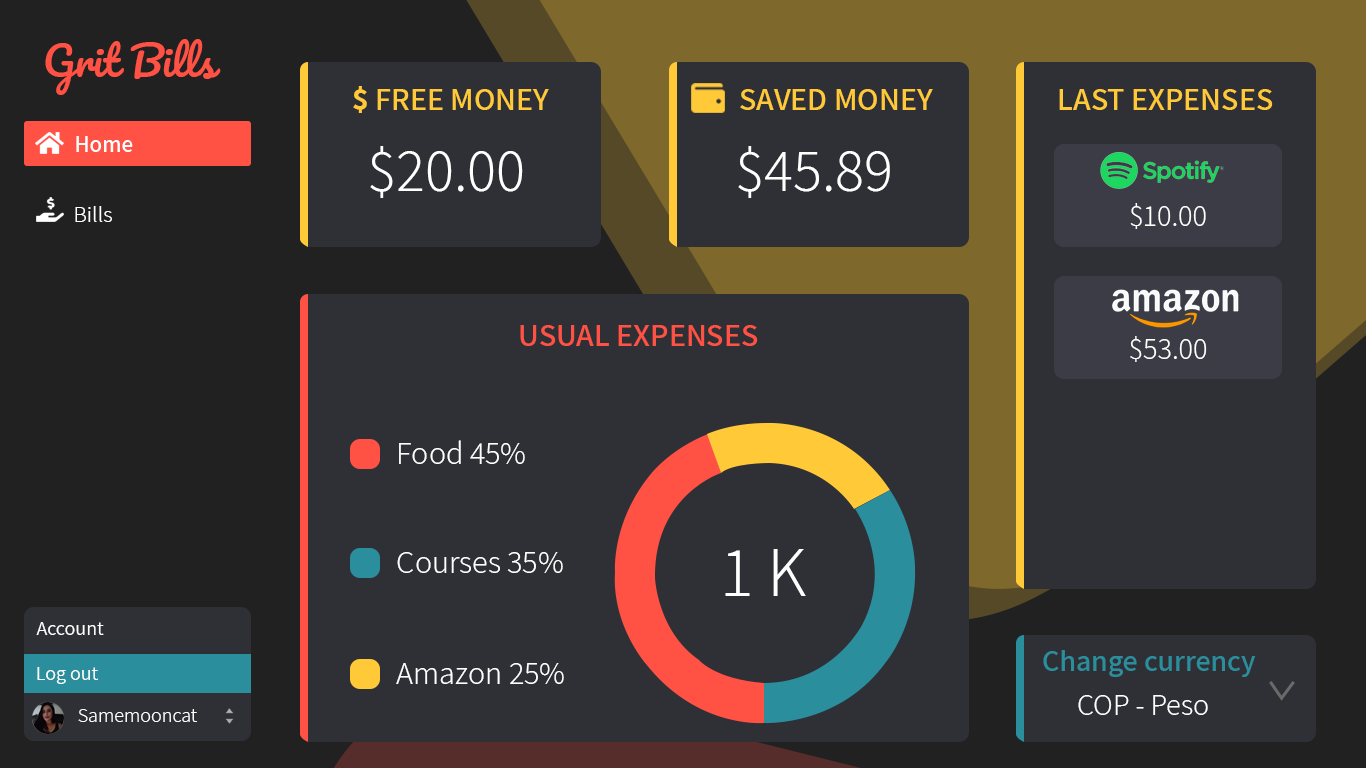
<style>
.page{position:relative;width:1366px;height:768px;background:#2f3036}
.page>*{position:absolute;margin:0}
.t1{font:40px "Pacifico-Regular";color:#ff5245}
.t2{font:32px "Assistant-SemiBold";color:#ffc938}
.t3{font:32px "Assistant-Bold";color:#ffc938}
.t4{font:23px "Assistant-SemiBold";color:#ffffff}
.t5{font:60px "Assistant-Light";color:#ffffff}
.t6{font:23px "Assistant-Light";color:#ffffff}
.t7{font:30px "Assistant-Light";color:#ffffff}
.t8{font:32px "Assistant-SemiBold";color:#ff5245}
.t9{font:32px "Assistant-Light";color:#ffffff}
.t10{font:70px "Assistant-Light";color:#ffffff}
.t11{font:20px "Assistant-Regular";color:#ffffff}
.t12{font:30px "Assistant-SemiBold";color:#2a8e9d}
.t13{font:20px "Assistant-Light";color:#ffffff}
</style>
<div class="page">
<p class="t1" style="left:45px;top:39px;width:176px;height:56px">Grit Bills</p>
<p class="t2" style="left:353px;top:86px;width:196px;height:27px"><span class="t3">$</span> FREE MONEY</p>
<p class="t2" style="left:740px;top:89px;width:193px;height:21px">SAVED MONEY</p>
<p class="t2" style="left:1059px;top:89px;width:214px;height:21px">LAST EXPENSES</p>
<p class="t4" style="left:76px;top:136px;width:57px;height:16px">Home</p>
<p class="t5" style="left:370px;top:146px;width:153px;height:52px">$20.00</p>
<p class="t5" style="left:738px;top:146px;width:152px;height:52px">$45.89</p>
<p class="t6" style="left:75px;top:206px;width:37px;height:16px">Bills</p>
<p class="t7" style="left:1130px;top:203px;width:76px;height:26px">$10.00</p>
<p class="t8" style="left:520px;top:325px;width:238px;height:21px">USUAL EXPENSES</p>
<p class="t7" style="left:1130px;top:336px;width:77px;height:26px">$53.00</p>
<p class="t9" style="left:399px;top:440px;width:126px;height:24px">Food 45%</p>
<p class="t9" style="left:397px;top:552px;width:166px;height:21px">Courses 35%</p>
<p class="t10" style="left:725px;top:549px;width:81px;height:47px">1 K</p>
<p class="t11" style="left:36px;top:622px;width:68px;height:13px">Account</p>
<p class="t12" style="left:1043px;top:650px;width:213px;height:27px">Change currency</p>
<p class="t9" style="left:396px;top:663px;width:168px;height:21px">Amazon 25%</p>
<p class="t11" style="left:37px;top:667px;width:61px;height:17px">Log out</p>
<p class="t7" style="left:1078px;top:695px;width:130px;height:20px">COP - Peso</p>
<p class="t13" style="left:78px;top:709px;width:119px;height:13px">Samemooncat</p>
<p class="t13" style="left:78px;top:709px;width:119px;height:13px">Samemooncat</p>
</div>
